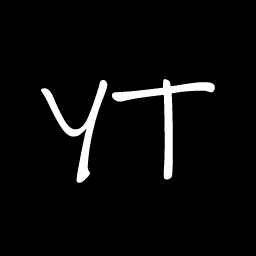
<style>
.page{position:relative;width:256px;height:256px;background:#000000}
.page>*{position:absolute;margin:0}
.t1{font:150px "InkFree";color:#ffffff}
</style>
<div class="page">
<p class="t1" style="left:41px;top:79px;width:174px;height:104px">YT</p>
</div>
